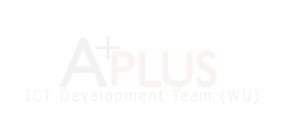
<style>
.page{position:relative;width:283px;height:137px;background:#ffffff}
.page>*{position:absolute;margin:0}
.t1{font:15.5px "Verdana";letter-spacing:0.15em;color:#f2f2f2;scale:0.82 1}
</style>
<div class="page">
<p class="t1" style="left:25px;top:89px;width:233px;height:15px">ICT Development Team (WU)</p>
</div>
